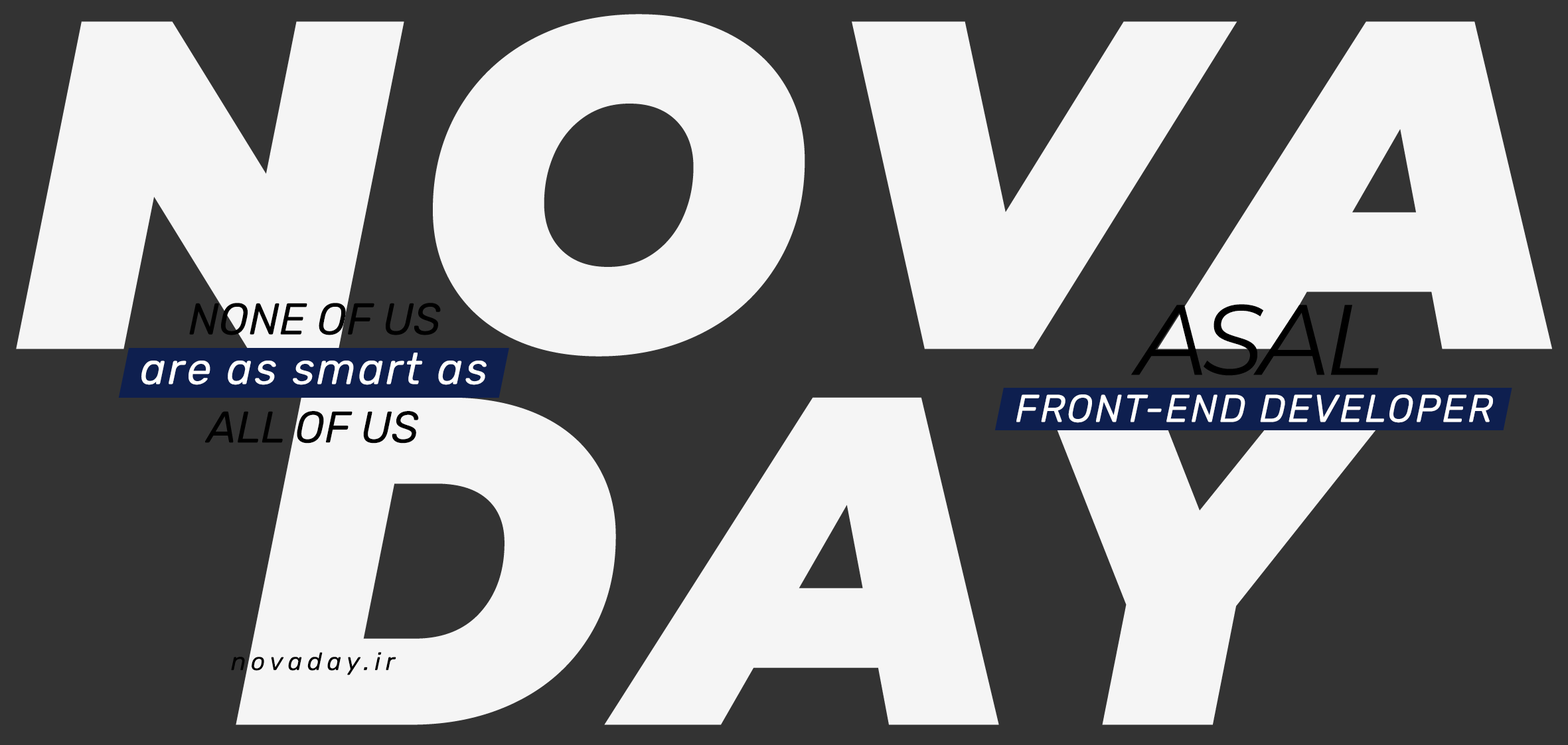
<style>
.page{position:relative;width:1568px;height:745px;background:#333333}
.page>*{position:absolute;margin:0}
.t1{font:467.1px/375.8px "Montserrat-BlackItalic";letter-spacing:0.05em;color:#f5f5f5}
.t2{font:44.3px "Rubik-Italic";color:#000000}
.t3{font:99.6px "Montserrat-Italic";letter-spacing:-0.05em;color:#000000}
.t4{font:44.3px "Rubik-Italic";letter-spacing:0.05em;color:#ffffff}
.t5{font:38.7px "Rubik-Italic";letter-spacing:0.05em;color:#ffffff}
.t6{font:24.9px "Rubik-Italic";letter-spacing:0.2em;color:#000000}
</style>
<div class="page">
<p class="t1" style="left:16px;top:14px;width:1536px;height:711px;text-align:center">NOVA<br>DAY</p>
<p class="t2" style="left:189px;top:303px;width:252px;height:32px">NONE OF US</p>
<p class="t3" style="left:1131px;top:304px;width:248px;height:72px">ASAL</p>
<p class="t4" style="left:141px;top:353px;width:346px;height:32px">are as smart as</p>
<p class="t5" style="left:1016px;top:394px;width:477px;height:29px">FRONT-END DEVELOPER</p>
<p class="t2" style="left:205px;top:411px;width:214px;height:32px">ALL OF US</p>
<p class="t6" style="left:231px;top:652px;width:165px;height:23px">novaday.ir</p>
</div>
